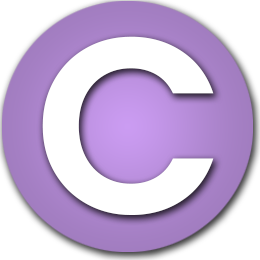
<style>
.page{position:relative;width:260px;height:260px;background:#ffffff}
.page>*{position:absolute;margin:0}
.t1{font:250px "Poppins-SemiBold";color:#ffffff}
</style>
<div class="page">
<p class="t1" style="left:42px;top:36px;width:172px;height:179px">C</p>
</div>
